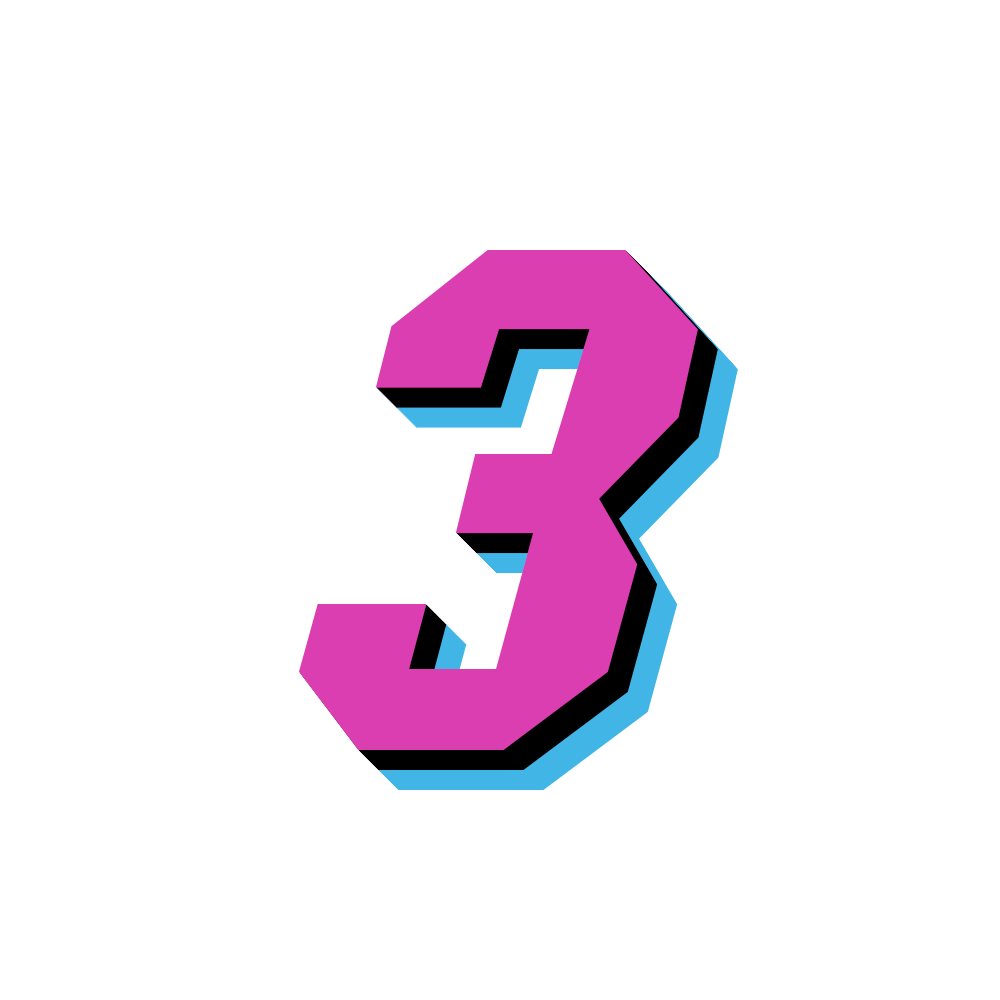
<style>
.page{position:relative;width:1000px;height:1000px;background:#ffffff}
.page>*{position:absolute;margin:0}
.t1{font:625px "NBAHeat";color:#db3eb1}
</style>
<div class="page">
<p class="t1" style="left:299px;top:250px;width:399px;height:500px">3</p>
</div>
